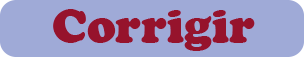
<style>
.page{position:relative;width:306px;height:57px;background:#9faad7}
.page>*{position:absolute;margin:0}
.t1{font:48px "CooperBlack";color:#96132c}
</style>
<div class="page">
<p class="t1" style="left:53px;top:9px;width:202px;height:42px">Corrigir</p>
</div>
